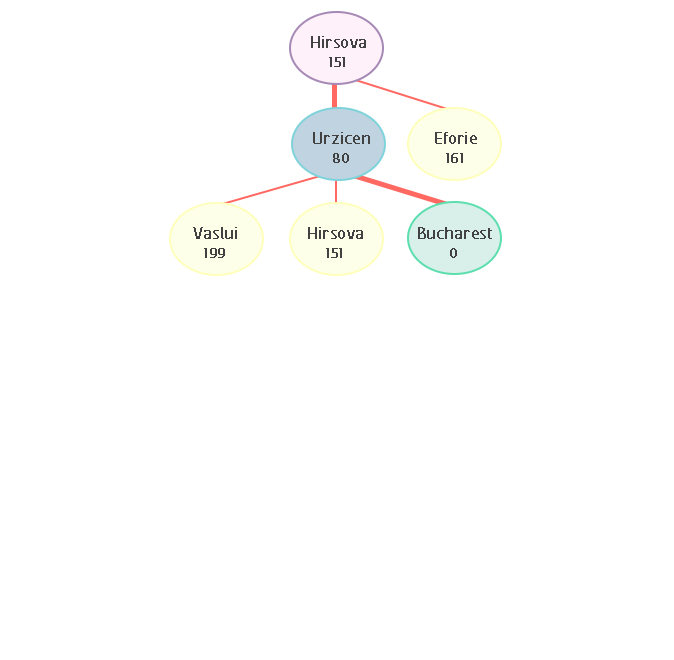
<style>
.page{position:relative;width:674px;height:660px;background:#ffffff}
.page>*{position:absolute;margin:0}
.t1{font:20.8px "FCActiveRegular";color:#424242;font-weight:bold}
.t2{font:16.7px "FCActiveRegular";color:#424141;font-weight:bold}
</style>
<div class="page">
<p class="t1" style="left:311px;top:36px;width:55px;height:12px">Hirsova</p>
<p class="t2" style="left:329px;top:57px;width:16px;height:10px">151</p>
<p class="t1" style="left:313px;top:132px;width:57px;height:12px">Urzicen</p>
<p class="t1" style="left:435px;top:132px;width:42px;height:12px">Eforie</p>
<p class="t2" style="left:333px;top:153px;width:16px;height:10px">80</p>
<p class="t2" style="left:446px;top:153px;width:17px;height:10px">161</p>
<p class="t1" style="left:193px;top:227px;width:44px;height:12px">Vaslui</p>
<p class="t1" style="left:308px;top:227px;width:55px;height:12px">Hirsova</p>
<p class="t1" style="left:418px;top:227px;width:74px;height:12px">Bucharest</p>
<p class="t2" style="left:204px;top:248px;width:21px;height:10px">199</p>
<p class="t2" style="left:326px;top:248px;width:16px;height:10px">151</p>
<p class="t2" style="left:450px;top:248px;width:7px;height:10px">0</p>
</div>
